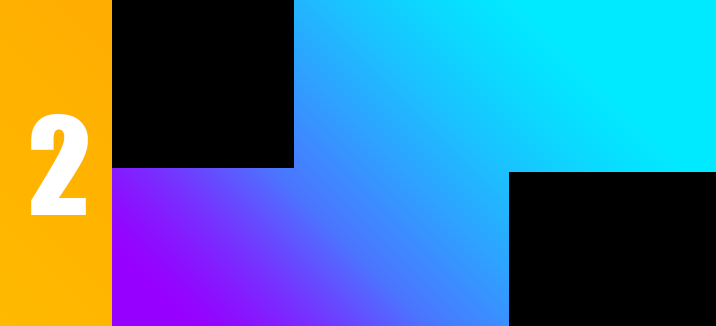
<style>
.page{position:relative;width:716px;height:326px;background:#000000}
.page>*{position:absolute;margin:0}
.t1{font:125px "Impact";color:#ffffff}
</style>
<div class="page">
<p class="t1" style="left:31px;top:114px;width:57px;height:101px">2</p>
</div>
